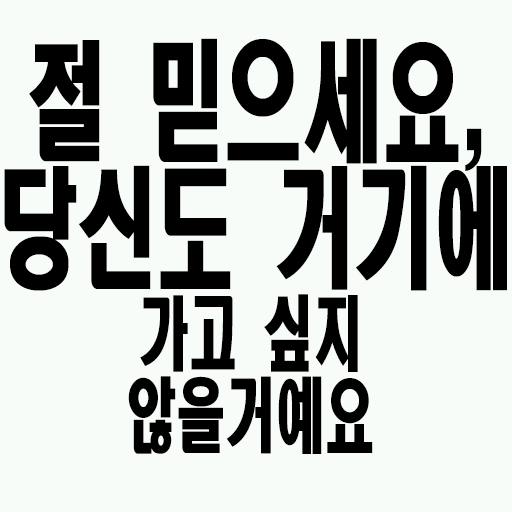
<style>
.page{position:relative;width:512px;height:512px;background:#f8fcf8}
.page>*{position:absolute;margin:0}
.t1{font:129.6px "HeadlineR-HM";color:#000000;scale:0.61 1}
.t2{font:81px/82px "HeadlineR-HM";color:#000000;scale:0.61 1}
</style>
<div class="page">
<p class="t1" style="left:29px;top:38px;width:453px;height:133px">절 믿으세요,</p>
<p class="t1" style="left:4px;top:165px;width:503px;height:126px">당신도 거기에</p>
<p class="t2" style="left:128px;top:294px;width:245px;height:160px;text-align:center">가고 싶지<br>않을거예요</p>
</div>
